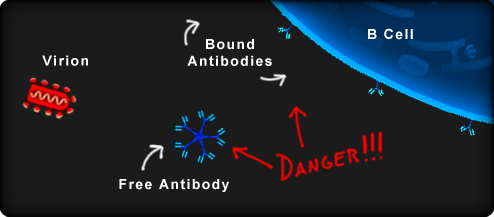
<style>
.page{position:relative;width:494px;height:217px;background:#1b1b1b}
.page>*{position:absolute;margin:0}
.t1{font:14px "Arial-BoldMT";letter-spacing:0.1em;color:#ffffff}
</style>
<div class="page">
<p class="t1" style="left:368px;top:28px;width:45px;height:12px">B Cell</p>
<p class="t1" style="left:187px;top:39px;width:85px;height:27px;text-align:center">Bound<br>Antibodies</p>
<p class="t1" style="left:42px;top:55px;width:46px;height:11px">Virion</p>
<p class="t1" style="left:119px;top:179px;width:110px;height:13px">Free Antibody</p>
</div>
